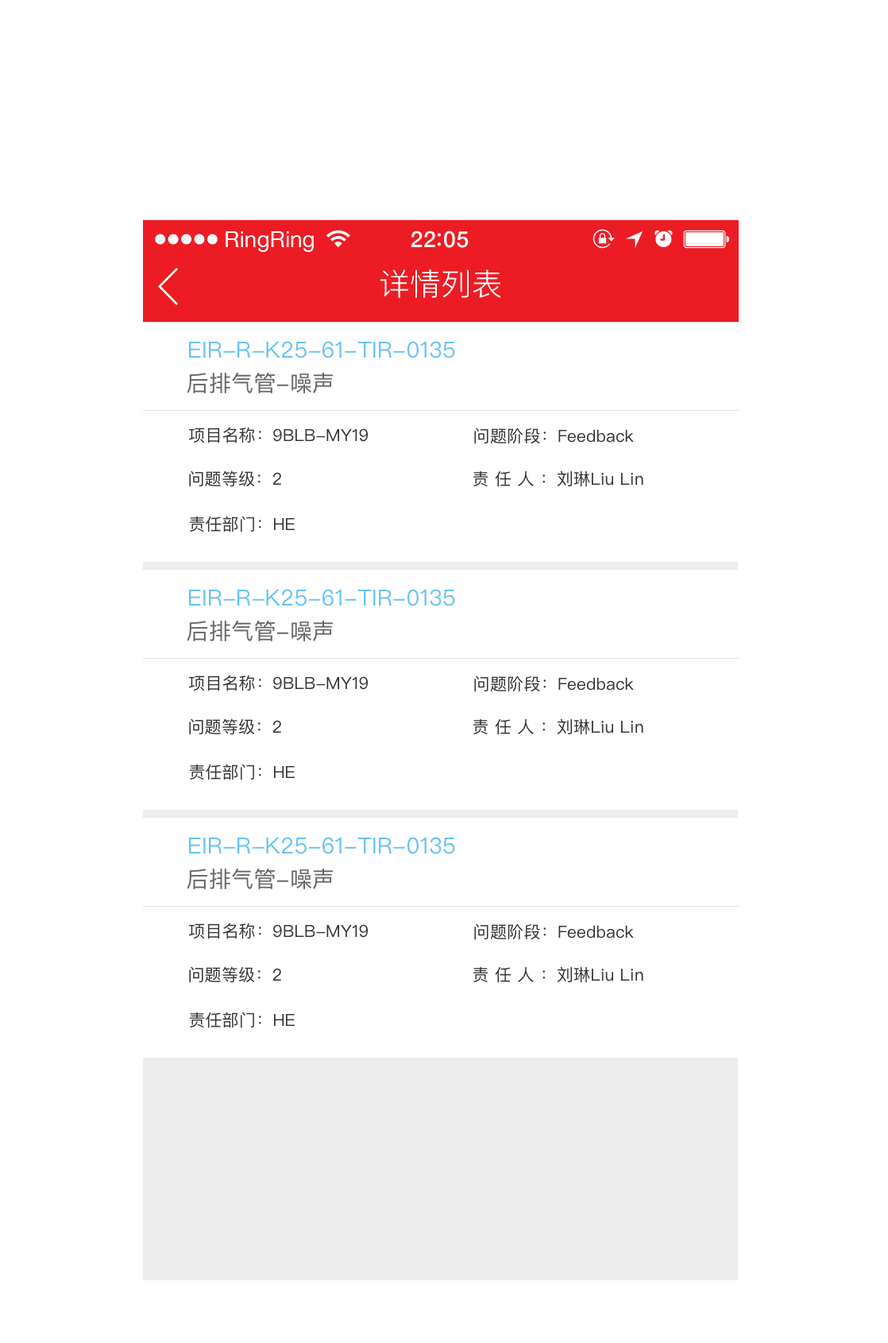
<style>
.page{position:relative;width:888px;height:1343px;background:#ffffff}
.page>*{position:absolute;margin:0}
.t1{font:22.3px "HelveticaNeue";color:#ffffff}
.t2{font:22.3px "HelveticaNeue-Medium";letter-spacing:0.03em;color:#ffffff}
.t3{font:30.7px "PingFang-SC-Regular";letter-spacing:0.01em;color:#ffffff}
.t4{font:22.2px "PingFangSC-Regular";letter-spacing:0.01em;color:#66c2f6}
.t5{font:22.2px "PingFangSC-Regular";letter-spacing:0.01em;color:#666666}
.t6{font:16.7px "PingFangSC-Regular";letter-spacing:0.01em;color:#333333}
.t7{font:16.7px "PingFangSC-Regular";letter-spacing:0.35em;color:#333333}
</style>
<div class="page">
<p class="t1" style="left:226px;top:231px;width:88px;height:21px">RingRing</p>
<p class="t2" style="left:411px;top:230px;width:58px;height:18px">22 05</p>
<p class="t3" style="left:380px;top:269px;width:121px;height:29px">详情列表</p>
<p class="t4" style="left:189px;top:341px;width:266px;height:17px">EIR-R-K25-61-TIR-0135</p>
<p class="t5" style="left:187px;top:373px;width:147px;height:20px">后排气管-噪声</p>
<p class="t6" style="left:189px;top:427px;width:179px;height:16px">项目名称：9BLB-MY19</p>
<p class="t6" style="left:474px;top:427px;width:160px;height:17px">问题阶段：Feedback</p>
<p class="t6" style="left:189px;top:470px;width:92px;height:17px">问题等级：2</p>
<p class="t7" style="left:473px;top:470px;width:72px;height:17px">责任人：</p>
<p class="t6" style="left:558px;top:470px;width:85px;height:17px">刘琳Liu Lin</p>
<p class="t6" style="left:189px;top:516px;width:106px;height:16px">责任部门：HE</p>
<p class="t4" style="left:189px;top:589px;width:266px;height:17px">EIR-R-K25-61-TIR-0135</p>
<p class="t5" style="left:187px;top:620px;width:147px;height:21px">后排气管-噪声</p>
<p class="t6" style="left:189px;top:674px;width:179px;height:17px">项目名称：9BLB-MY19</p>
<p class="t6" style="left:474px;top:675px;width:160px;height:17px">问题阶段：Feedback</p>
<p class="t6" style="left:189px;top:718px;width:92px;height:17px">问题等级：2</p>
<p class="t7" style="left:473px;top:718px;width:72px;height:17px">责任人：</p>
<p class="t6" style="left:558px;top:718px;width:85px;height:17px">刘琳Liu Lin</p>
<p class="t6" style="left:189px;top:763px;width:106px;height:17px">责任部门：HE</p>
<p class="t4" style="left:189px;top:837px;width:266px;height:17px">EIR-R-K25-61-TIR-0135</p>
<p class="t5" style="left:187px;top:868px;width:147px;height:21px">后排气管-噪声</p>
<p class="t6" style="left:189px;top:922px;width:179px;height:17px">项目名称：9BLB-MY19</p>
<p class="t6" style="left:474px;top:923px;width:160px;height:17px">问题阶段：Feedback</p>
<p class="t6" style="left:189px;top:966px;width:92px;height:17px">问题等级：2</p>
<p class="t7" style="left:473px;top:966px;width:72px;height:17px">责任人：</p>
<p class="t6" style="left:558px;top:966px;width:85px;height:17px">刘琳Liu Lin</p>
<p class="t6" style="left:189px;top:1011px;width:106px;height:17px">责任部门：HE</p>
</div>
